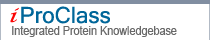
<style>
.page{position:relative;width:210px;height:40px;background:#ffffff}
.page>*{position:absolute;margin:0}
.t1{font:18px "LucidaCalligraphy-Italic";color:#fc0505;font-style:italic;scale:1.2 1}
.t2{font:12px "ArialMT";color:#696969;scale:0.9 1}
</style>
<div class="page">
<p class="t1" style="left:7px;top:6px;width:12px;height:22px">i</p>
<p class="t2" style="left:11px;top:25px;width:166px;height:14px">Integrated Protein Knowledgebase</p>
</div>
